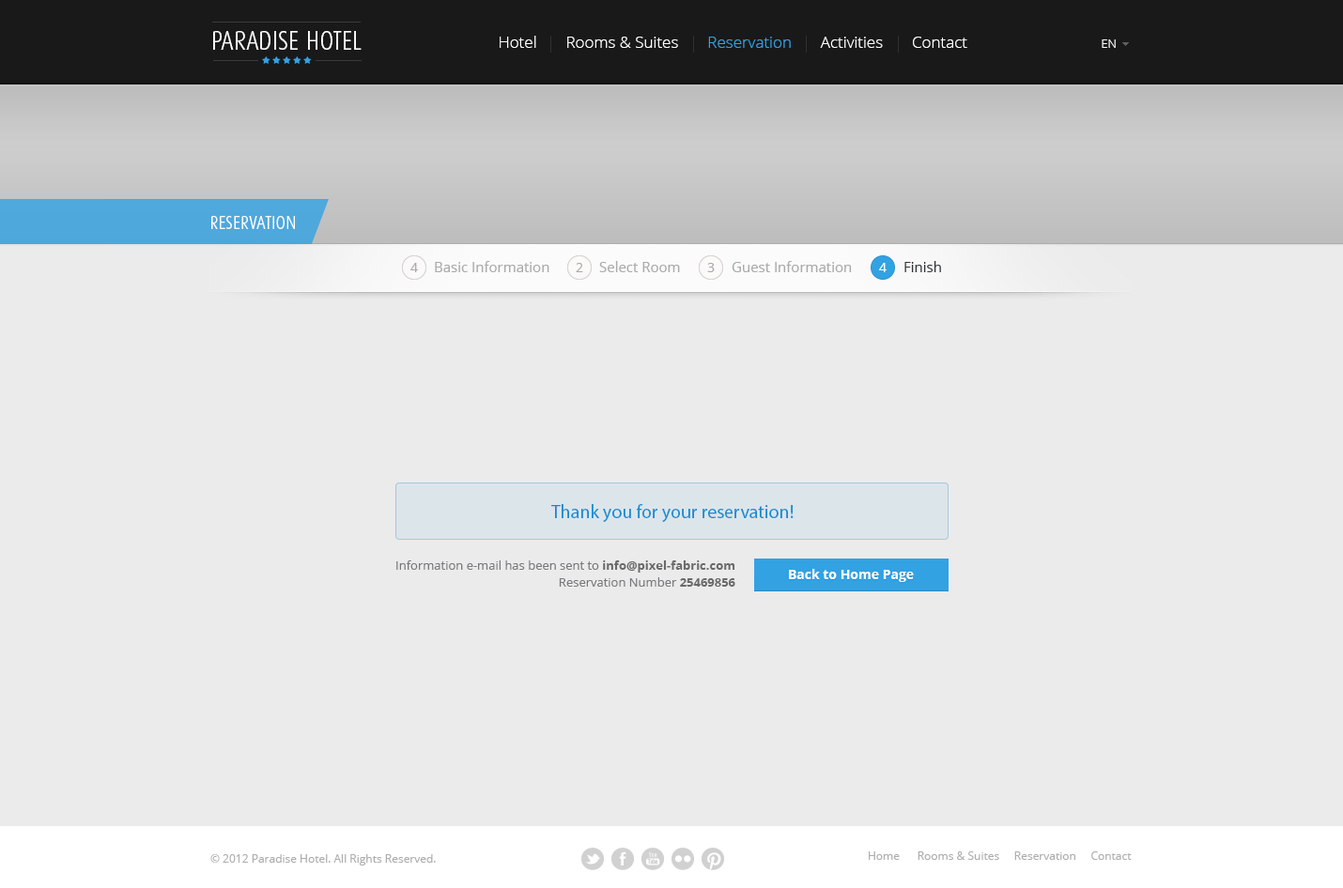
<style>
.page{position:relative;width:1343px;height:888px;background:#ebebeb}
.page>*{position:absolute;margin:0}
.t1{font:26.3px "DaxCondensed-Light";color:#ffffff;text-transform:uppercase}
.t2{font:16px "OpenSans-Light";color:#ffffff}
.t3{font:16px "OpenSans-Light";color:#32a2e3}
.t4{font:12.2px "OpenSans-Light";color:#ffffff}
.t5{font:18.8px "DaxCondensed-Light";color:#ffffff;text-transform:uppercase}
.t6{font:13.1px "OpenSans";color:#aaaaaa}
.t7{font:14.1px "OpenSans";color:#aaabab}
.t8{font:13.1px "OpenSans";color:#ffffff}
.t9{font:14.1px "OpenSans";color:#313538}
.t10{font:18.8px "MyriadPro-Regular";color:#148bd1}
.t11{font:12.2px/16.9px "OpenSans";color:#6a6a6a}
.t12{font:12.2px/16.9px "OpenSans-Bold";color:#6a6a6a}
.t13{font:13.1px "OpenSans-Bold";color:#ffffff}
.t14{font:11.3px "OpenSans";color:#aeadad}
</style>
<div class="page">
<p class="t1" style="left:213px;top:31px;width:148px;height:19px">Paradise hotel</p>
<p class="t2" style="left:499px;top:36px;width:468px;height:12px">Hotel       Rooms &amp; Suites       <span class="t3">Reservation</span>       Activities       Contact</p>
<p class="t4" style="left:1101px;top:39px;width:14px;height:9px">EN</p>
<p class="t5" style="left:211px;top:216px;width:84px;height:13px">reservation</p>
<p class="t6" style="left:410px;top:263px;width:8px;height:9px">4</p>
<p class="t7" style="left:435px;top:261px;width:114px;height:11px">Basic Information</p>
<p class="t6" style="left:576px;top:263px;width:7px;height:9px">2</p>
<p class="t7" style="left:599px;top:261px;width:81px;height:11px">Select Room</p>
<p class="t6" style="left:707px;top:263px;width:7px;height:9px">3</p>
<p class="t7" style="left:731px;top:261px;width:121px;height:11px">Guest Information</p>
<p class="t8" style="left:879px;top:263px;width:7px;height:9px">4</p>
<p class="t9" style="left:904px;top:261px;width:37px;height:11px">Finish</p>
<p class="t10" style="left:551px;top:504px;width:242px;height:18px">Thank you for your reservation!</p>
<p class="t11" style="left:396px;top:561px;width:339px;height:26px;text-align:right">Information e-mail has been sent to <span class="t12">info@pixel-fabric.com<br></span>Reservation Number <span class="t12">25469856</span></p>
<p class="t13" style="left:789px;top:569px;width:125px;height:13px">Back to Home Page</p>
<p class="t14" style="left:210px;top:854px;width:226px;height:12px">© 2012 Paradise Hotel. All Rights Reserved.</p>
<p class="t14" style="left:868px;top:852px;width:263px;height:8px">Home      Rooms &amp; Suites     Reservation     Contact</p>
</div>
